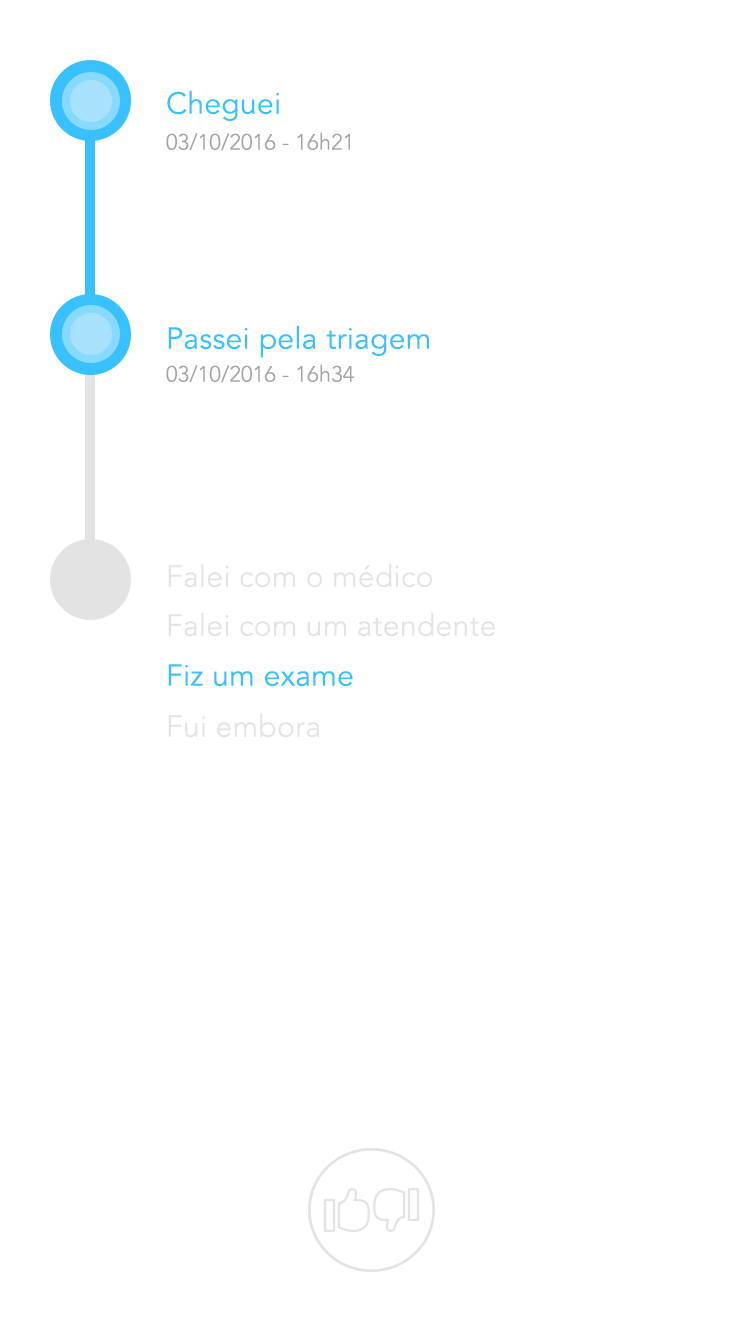
<style>
.page{position:relative;width:750px;height:1334px;background:#ffffff}
.page>*{position:absolute;margin:0}
.t1{font:30px "AvenirLTStd-Book";letter-spacing:0.01em;color:#39c0ff}
.t2{font:22px "AvenirLTStd-Light";letter-spacing:0.01em;color:#a3a4a4}
.t3{font:30px "AvenirLTStd-Light";letter-spacing:0.01em;color:#e3e3e3}
</style>
<div class="page">
<p class="t1" style="left:167px;top:90px;width:113px;height:31px">Cheguei</p>
<p class="t2" style="left:166px;top:132px;width:184px;height:19px">03/10/2016 - 16h21</p>
<p class="t1" style="left:168px;top:325px;width:261px;height:33px">Passei pela triagem</p>
<p class="t2" style="left:166px;top:364px;width:188px;height:19px">03/10/2016 - 16h34</p>
<p class="t3" style="left:168px;top:563px;width:264px;height:25px">Falei com o médico</p>
<p class="t3" style="left:168px;top:612px;width:327px;height:25px">Falei com um atendente</p>
<p class="t1" style="left:168px;top:664px;width:185px;height:23px">Fiz um exame</p>
<p class="t3" style="left:168px;top:713px;width:151px;height:25px">Fui embora</p>
</div>
